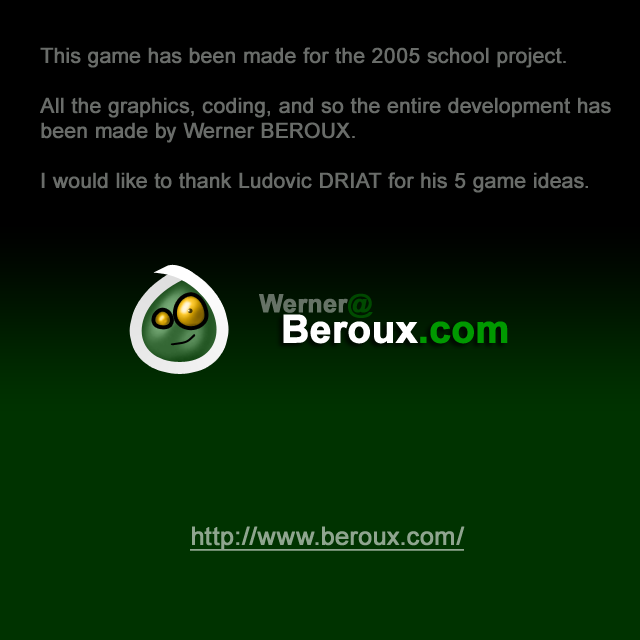
<style>
.page{position:relative;width:640px;height:640px;background:#003300}
.page>*{position:absolute;margin:0}
.t1{font:20.8px "ArialMT";color:#696c69;font-weight:bold}
.t2{font:25px "Arial-BoldMT";letter-spacing:-0.01em;color:#667266;font-weight:bold}
.t3{font:38.6px "Arial-BoldMT";letter-spacing:-0.01em;color:#ffffff;font-weight:bold}
.t4{font:38.6px "Arial-BoldMT";letter-spacing:-0.01em;color:#009900;font-weight:bold}
.t5{font:25px "ArialMT";color:#8fa58f;font-weight:bold;text-decoration:underline}
</style>
<div class="page">
<p class="t1" style="left:40px;top:47px;width:571px;height:146px">This game has been made for the 2005 school project.<br><br>All the graphics, coding, and so the entire development has been made by Werner BEROUX.<br><br>I would like to thank Ludovic DRIAT for his 5 game ideas.</p>
<p class="t2" style="left:259px;top:293px;width:114px;height:25px">Werner@</p>
<p class="t3" style="left:283px;top:314px;width:225px;height:30px">Beroux<span class="t4">.com</span></p>
<p class="t5" style="left:190px;top:526px;width:275px;height:25px">http://www.beroux.com/</p>
</div>
